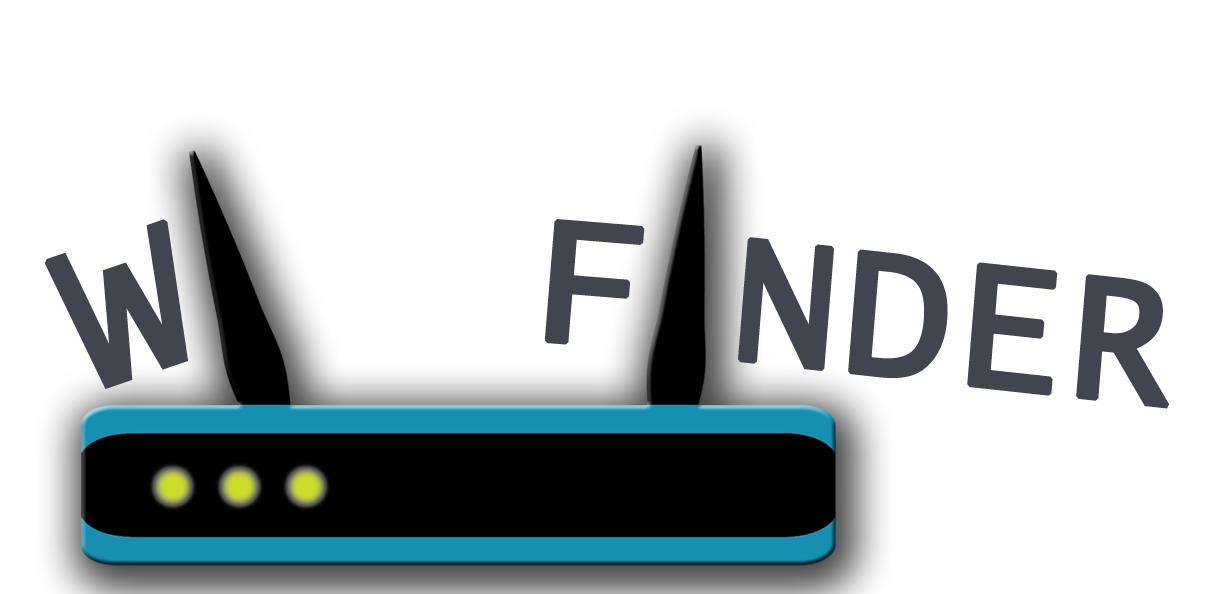
<style>
.page{position:relative;width:1215px;height:594px;background:#ffffff}
.page>*{position:absolute;margin:0}
.t1{font:309.7px "LucidaConsole";color:#42454f;font-variant:small-caps;font-weight:bold}
.t2{font:271.4px "LucidaConsole";color:#42454f;font-variant:small-caps;font-weight:bold}
.t3{font:272.8px "LucidaConsole";color:#42454f;font-variant:small-caps;font-weight:bold;scale:0.93 1}
</style>
<div class="page">
<p class="t1" style="left:44px;top:219px;width:144px;height:170px;rotate:-19deg">w</p>
<p class="t2" style="left:544px;top:219px;width:101px;height:126px;rotate:5deg">f</p>
<p class="t3" style="left:738px;top:237px;width:431px;height:172px;rotate:6deg">nder</p>
</div>
